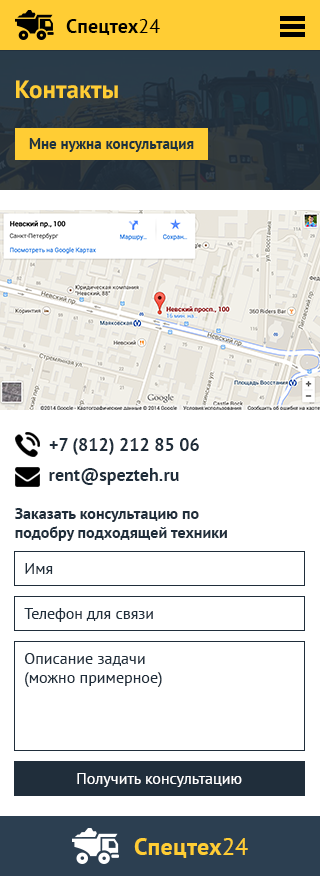
<style>
.page{position:relative;width:320px;height:876px;background:#ffffff}
.page>*{position:absolute;margin:0}
.t1{font:20px "PTSans-Bold";letter-spacing:0.01em;color:#000000}
.t2{font:20px "PTSans-Regular";letter-spacing:0.01em;color:#000000}
.t3{font:25px "PTSans-Bold";color:#ffcd34}
.t4{font:15px "PTSans-Bold";color:#1d333f}
.t5{font:18px "PTSans-Bold";color:#202e3b}
.t6{font:16px "PTSans-Bold";color:#202e3b}
.t7{font:16px "PTSans-Regular";color:#202e3b}
.t8{font:16px "PTSans-Regular";color:#ffffff}
.t9{font:24px "PTSans-Bold";letter-spacing:0.01em;color:#ffcd34}
.t10{font:24px "PTSans-Regular";letter-spacing:0.01em;color:#ffcd34}
</style>
<div class="page">
<p class="t1" style="left:66px;top:19px;width:94px;height:16px">Спецтех<span class="t2">24</span></p>
<p class="t3" style="left:16px;top:80px;width:102px;height:19px">Контакты</p>
<p class="t4" style="left:29px;top:138px;width:165px;height:14px">Мне нужна консультация</p>
<p class="t5" style="left:49px;top:438px;width:150px;height:17px">+7 (812) 212 85 06</p>
<p class="t5" style="left:49px;top:468px;width:130px;height:17px">rent@spezteh.ru</p>
<p class="t6" style="left:15px;top:508px;width:212px;height:33px">Заказать консультацию по <br>подобру подходящей техники</p>
<p class="t7" style="left:25px;top:563px;width:28px;height:11px">Имя</p>
<p class="t7" style="left:24px;top:608px;width:129px;height:14px">Телефон для связи</p>
<p class="t7" style="left:25px;top:653px;width:137px;height:34px">Описание задачи <br>(можно примерное)</p>
<p class="t8" style="left:77px;top:773px;width:165px;height:14px">Получить консультацию</p>
<p class="t9" style="left:134px;top:838px;width:114px;height:20px">Спецтех<span class="t10">24</span></p>
</div>
